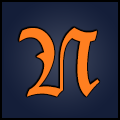
<style>
.page{position:relative;width:120px;height:120px}
.page>*{position:absolute;margin:0}
.t1{font:90px "LucidaBlackletter";color:#ff7f20}
</style>
<div class="page">
<p class="t1" style="left:19px;top:27px;width:81px;height:70px">N</p>
</div>
